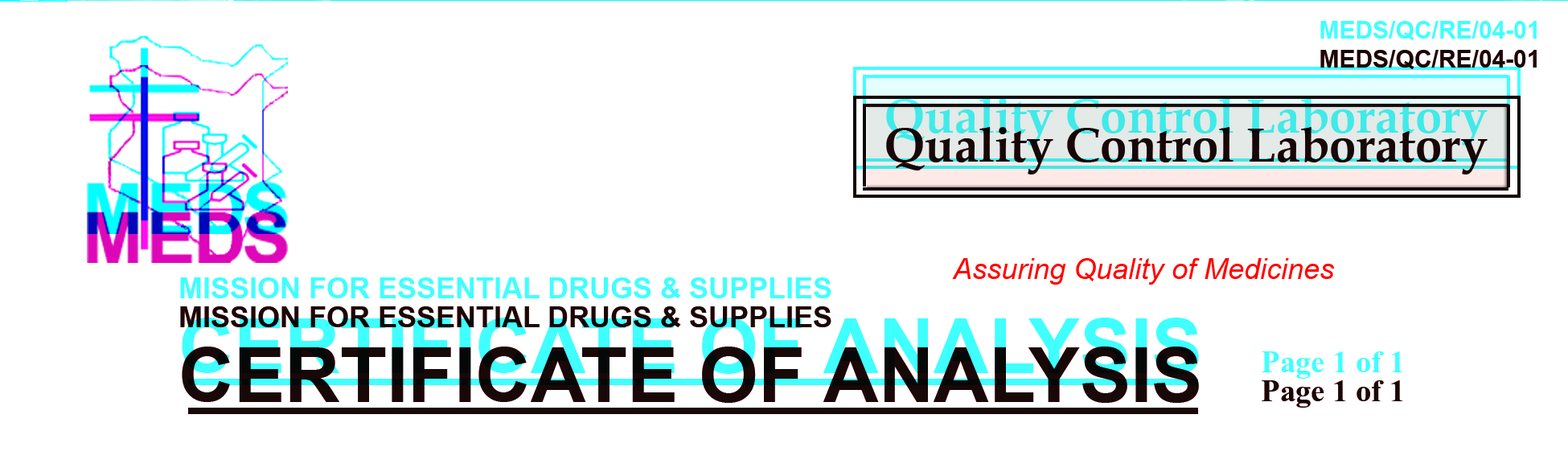
<style>
.page{position:relative;width:1568px;height:476px;background:#ffffff}
.page>*{position:absolute;margin:0}
.t1{font:24.1px "Arial-BoldMT";color:#40ffff}
.t2{font:48.2px "BookAntiqua-Bold";color:#40eae8}
.t3{font:28.9px "Arial-BoldMT";color:#40ffff}
.t4{font:76.4px "Arial-BoldMT"}
.t5{font:38.6px "Aparajita-Bold";color:#40ffff}
</style>
<div class="page">
<p class="t1" style="left:1320px;top:20px;width:217px;height:19px">MEDS/QC/RE/04-01</p>
<p class="t2" style="left:886px;top:97px;width:602px;height:48px">Quality Control Laboratory</p>
<p class="t3" style="left:180px;top:277px;width:651px;height:21px">MISSION FOR ESSENTIAL DRUGS &amp; SUPPLIES</p>
<p class="t4" style="left:182px;top:317px;width:1017px;height:56px">CERTIFICATE OF ANALYSIS</p>
<p class="t5" style="left:1262px;top:351px;width:141px;height:27px">Page 1 of 1</p>
</div>
